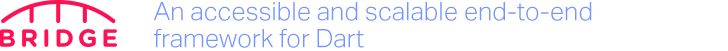
<style>
.page{position:relative;width:728px;height:51px;background:#ffffff}
.page>*{position:absolute;margin:0}
.t1{font:25.4px/27.2px "AktivGrotesk-Light";color:#7596ff}
</style>
<div class="page">
<p class="t1" style="left:153px;top:2px;width:439px;height:46px">An accessible and scalable end-to-end framework for Dart</p>
</div>
